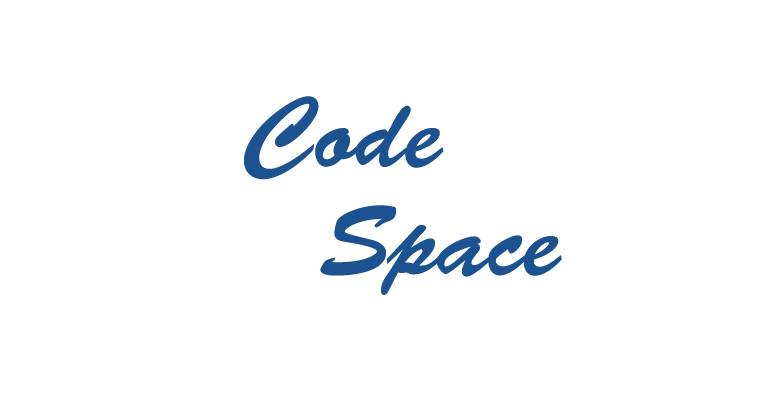
<style>
.page{position:relative;width:760px;height:406px;background:#ffffff}
.page>*{position:absolute;margin:0}
.t1{font:100px "BrushScriptStd";color:#1c5290}
</style>
<div class="page">
<p class="t1" style="left:244px;top:96px;width:200px;height:84px">Code</p>
<p class="t1" style="left:320px;top:205px;width:242px;height:90px">Space</p>
</div>
